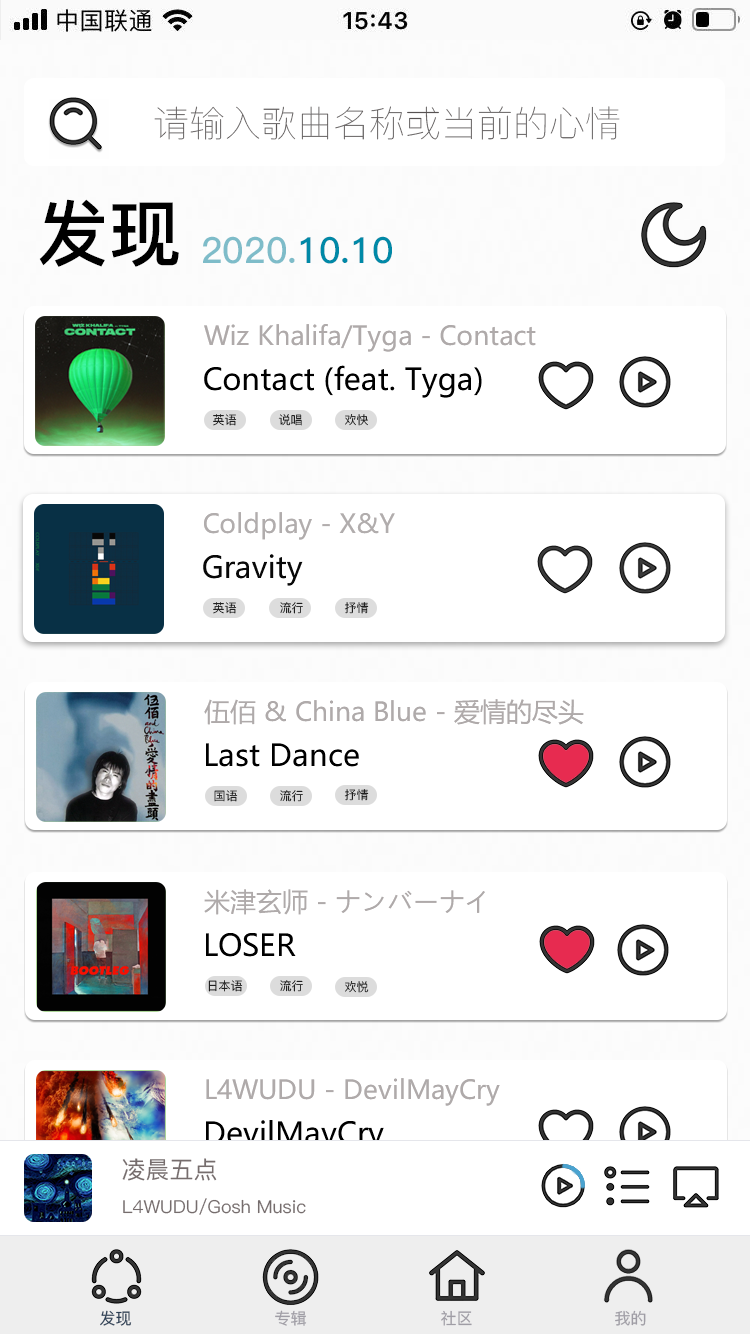
<style>
.page{position:relative;width:750px;height:1334px;background:#ffffff}
.page>*{position:absolute;margin:0}
.t1{font:36px "PingFang-SC-ExtraLight";color:#575252}
.t2{font:72px "PingFang-SC-Bold";color:#000000}
.t3{font:36px "PingFang-SC-Bold";color:#7ebcc9}
.t4{font:36px "PingFang-SC-Bold";color:#0089a7}
.t5{font:26px "MicrosoftYaHei";color:#afaaaa}
.t6{font:30px "MicrosoftYaHei";color:#000000}
.t7{font:12px "PingFang-SC-Regular"}
.t8{font:24px "PingFang-SC-Medium";color:#766d6d}
.t9{font:18px "PingFang-SC-Medium";color:#766d6d}
.t10{font:16px "PingFang-SC-Medium";color:#2a3e55}
.t11{font:16px "PingFang-SC-Medium";color:#9f9da5}
</style>
<div class="page">
<p class="t1" style="left:154px;top:106px;width:466px;height:34px">请输入歌曲名称或当前的心情</p>
<p class="t2" style="left:39px;top:199px;width:140px;height:68px">发现</p>
<p class="t3" style="left:203px;top:236px;width:189px;height:28px">2020.<span class="t4">10.10</span></p>
<p class="t5" style="left:204px;top:324px;width:332px;height:28px">Wiz Khalifa/Tyga - Contact</p>
<p class="t6" style="left:204px;top:365px;width:278px;height:33px">Contact (feat. Tyga)</p>
<p class="t7" style="left:213px;top:414px;width:24px;height:12px">英语</p>
<p class="t7" style="left:278px;top:414px;width:24px;height:12px">说唱</p>
<p class="t7" style="left:345px;top:414px;width:23px;height:12px">欢快</p>
<p class="t5" style="left:204px;top:512px;width:191px;height:28px">Coldplay - X&amp;Y</p>
<p class="t6" style="left:203px;top:554px;width:100px;height:32px">Gravity</p>
<p class="t7" style="left:213px;top:602px;width:24px;height:12px">英语</p>
<p class="t7" style="left:280px;top:602px;width:23px;height:12px">流行</p>
<p class="t7" style="left:344px;top:602px;width:25px;height:12px">抒情</p>
<p class="t5" style="left:204px;top:699px;width:380px;height:26px">伍佰 &amp; China Blue - 爱情的尽头</p>
<p class="t6" style="left:206px;top:743px;width:153px;height:24px">Last Dance</p>
<p class="t7" style="left:214px;top:790px;width:24px;height:12px">国语</p>
<p class="t7" style="left:280px;top:790px;width:23px;height:12px">流行</p>
<p class="t7" style="left:344px;top:789px;width:25px;height:12px">抒情</p>
<p class="t5" style="left:204px;top:889px;width:281px;height:26px">米津玄师 - ナンバーナイ</p>
<p class="t6" style="left:206px;top:933px;width:90px;height:24px">LOSER</p>
<p class="t7" style="left:208px;top:980px;width:35px;height:12px">日本语</p>
<p class="t7" style="left:280px;top:980px;width:23px;height:12px">流行</p>
<p class="t7" style="left:345px;top:981px;width:24px;height:12px">欢悦</p>
<p class="t5" style="left:206px;top:1078px;width:294px;height:28px">L4WUDU - DevilMayCry</p>
<p class="t6" style="left:206px;top:1120px;width:178px;height:32px">DevilMayCry</p>
<p class="t8" style="left:122px;top:1158px;width:95px;height:23px">凌晨五点</p>
<p class="t9" style="left:123px;top:1198px;width:183px;height:17px">L4WUDU/Gosh Music</p>
<p class="t10" style="left:100px;top:1310px;width:32px;height:16px">发现</p>
<p class="t11" style="left:275px;top:1310px;width:32px;height:16px">专辑</p>
<p class="t11" style="left:441px;top:1310px;width:31px;height:16px">社区</p>
<p class="t11" style="left:615px;top:1310px;width:31px;height:16px">我的</p>
</div>
